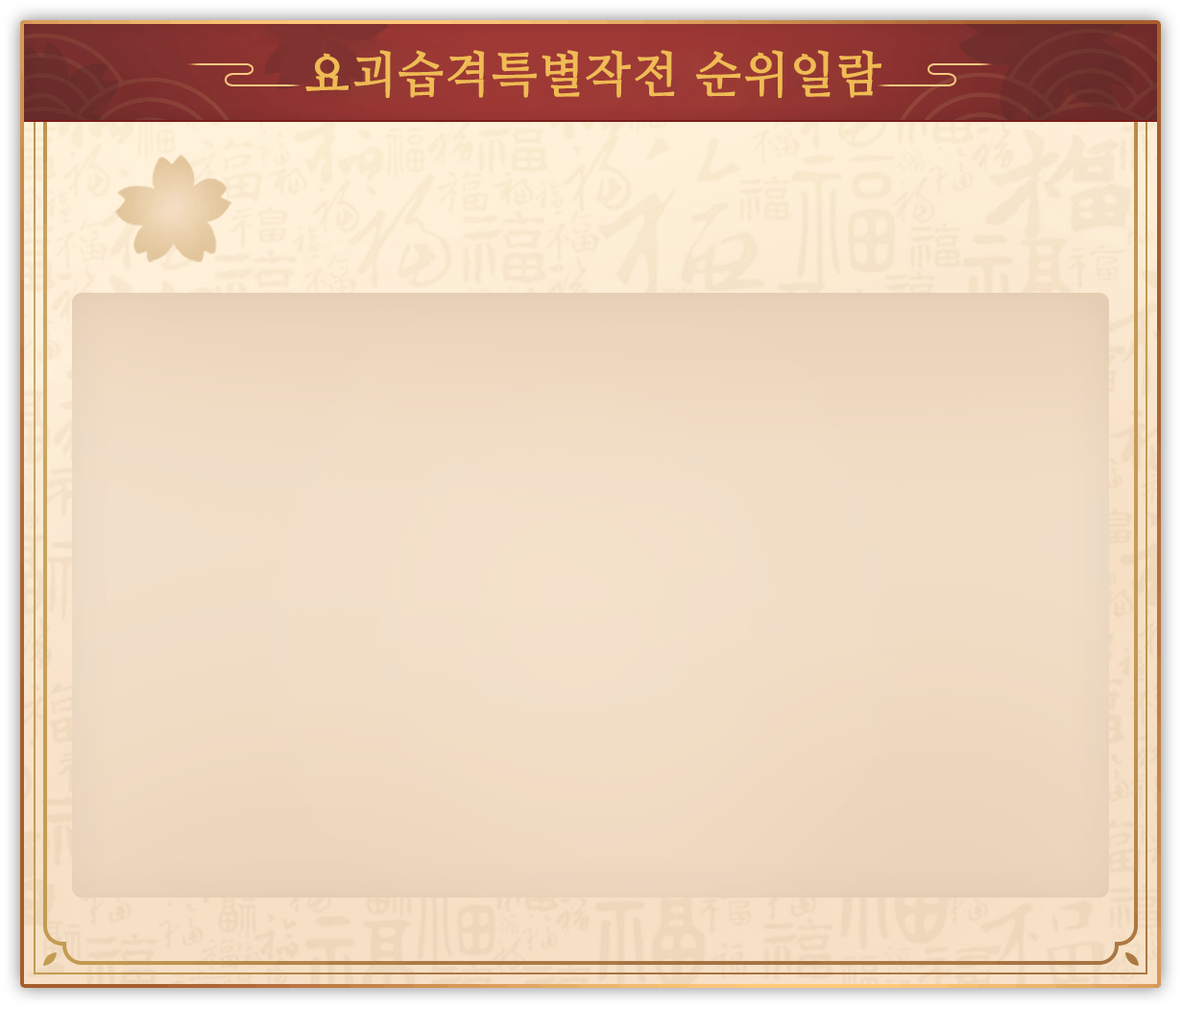
<style>
.page{position:relative;width:1182px;height:1009px}
.page>*{position:absolute;margin:0}
.t1{font:49px "NanumMyeongjo";letter-spacing:0.02em;color:#f0bb54;font-weight:bold;scale:0.96 1}
</style>
<div class="page">
<p class="t1" style="left:305px;top:50px;width:576px;height:49px">요괴습격특별작전 순위일람</p>
</div>
